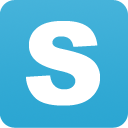
<style>
.page{position:relative;width:128px;height:128px;background:#ffffff}
.page>*{position:absolute;margin:0}
.t1{font:114px "Arial-Black";color:#ffffff;text-transform:uppercase}
</style>
<div class="page">
<p class="t1" style="left:26px;top:21px;width:74px;height:85px">S</p>
</div>
